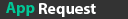
<style>
.page{position:relative;width:128px;height:19px;background:#333333}
.page>*{position:absolute;margin:0}
.t1{font:16px "MyriadPro-Bold";color:#00c796}
.t2{font:16px "MyriadPro-Bold";color:#ffffff}
</style>
<div class="page">
<p class="t1" style="left:6px;top:2px;width:29px;height:14px">App</p>
<p class="t2" style="left:39px;top:3px;width:57px;height:14px">Request</p>
</div>
